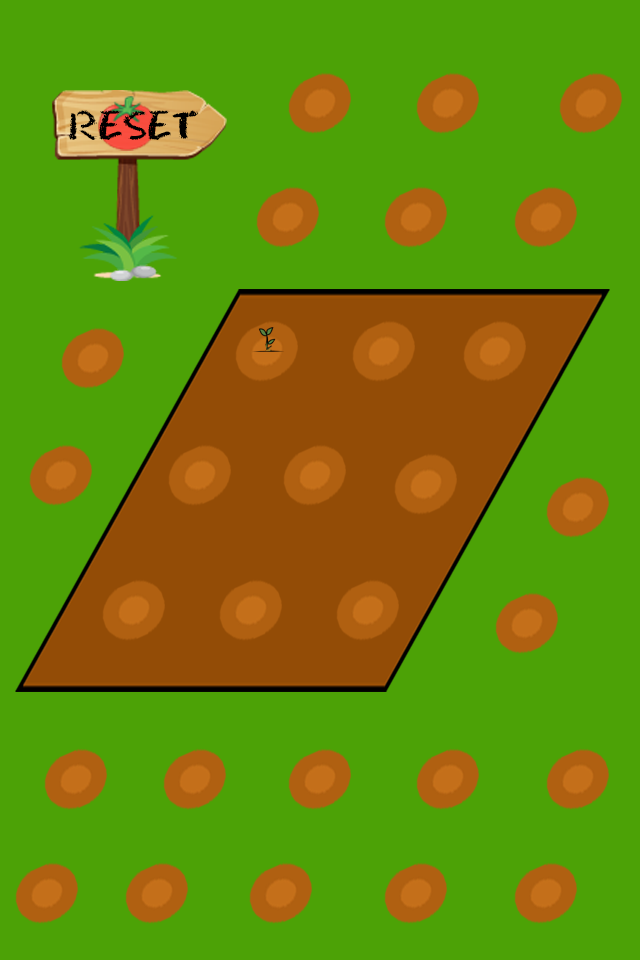
<style>
.page{position:relative;width:640px;height:960px;background:#4ca206}
.page>*{position:absolute;margin:0}
.t1{font:37px "Eraser-Regular";color:#000000}
</style>
<div class="page">
<p class="t1" style="left:68px;top:110px;width:130px;height:30px">RESET</p>
</div>
